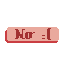
<style>
.page{position:relative;width:64px;height:64px;background:#ffffff}
.page>*{position:absolute;margin:0}
.t1{font:14px "Superscript";color:#a23232}
</style>
<div class="page">
<p class="t1" style="left:15px;top:28px;width:36px;height:12px">No :(</p>
</div>
